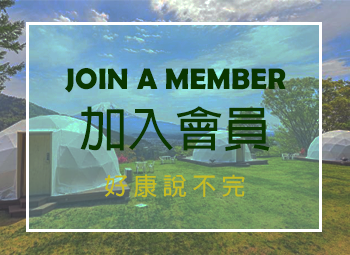
<style>
.page{position:relative;width:350px;height:255px}
.page>*{position:absolute;margin:0}
.t1{font:30px "BerlinSansFBDemi-Bold";color:#0a3600}
.t2{font:48px "AdobeFanHeitiStd-Bold";color:#0b3700}
.t3{font:24px "AdobeFanHeitiStd-Bold";color:#c6bc22}
</style>
<div class="page">
<p class="t1" style="left:65px;top:68px;width:221px;height:25px">JOIN A MEMBER</p>
<p class="t2" style="left:80px;top:106px;width:190px;height:45px">加入會員</p>
<p class="t3" style="left:104px;top:174px;width:141px;height:24px">好 康 說 不 完</p>
</div>
